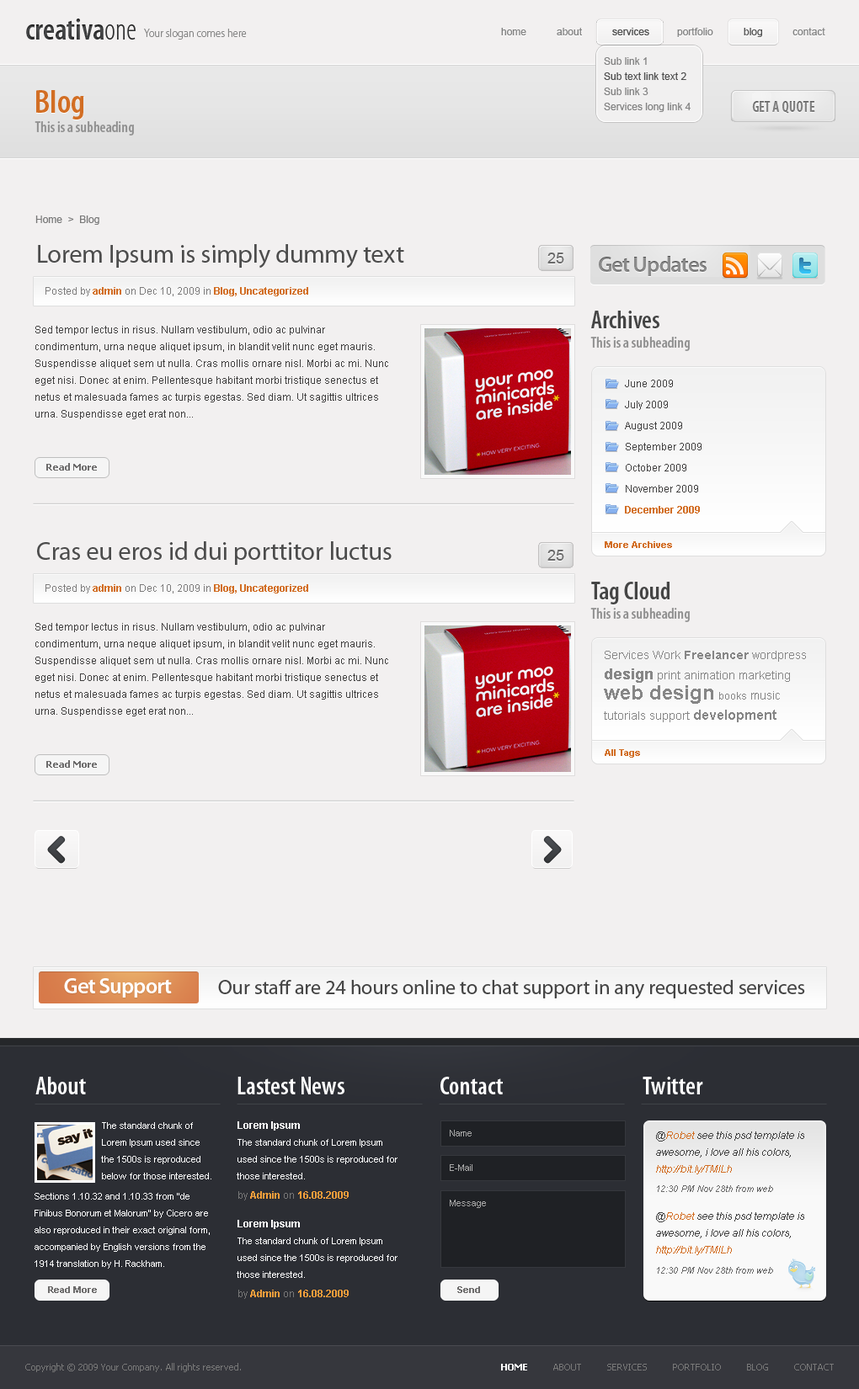
<style>
.page{position:relative;width:859px;height:1389px;background:#f2f0f0}
.page>*{position:absolute;margin:0}
.t1{font:30.3px "MyriadPro-SemiboldCond";color:#37393c}
.t2{font:30.3px "MyriadPro-LightCond";color:#37393c}
.t3{font:11.8px "MyriadPro-LightSemiCn";color:#868686}
.t4{font:10.1px "ArialMT";color:#818181}
.t5{font:10.1px "ArialMT";color:#4e4e4e}
.t6{font:10.1px/15.2px "ArialMT";color:#818181}
.t7{font:10.1px/15.2px "ArialMT";color:#4e4e4e}
.t8{font:33.7px "MyriadPro-SemiboldCond";color:#d26e24}
.t9{font:15.2px "MyriadPro-SemiboldCond";color:#818181}
.t10{font:15.2px "MyriadPro-SemiboldCond";color:#909090}
.t11{font:10.1px "ArialMT";color:#797979}
.t12{font:25.3px "MyriadPro-Regular";color:#4c4c4c}
.t13{font:15.2px "ArialMT";color:#6a6a6a}
.t14{font:21.9px "MyriadPro-Semibold";letter-spacing:-0.035em;color:#8b8b8b}
.t15{font:10.1px "Arial-BoldMT";color:#d26e24}
.t16{font:10.1px "ArialMT";color:#7d7c7c}
.t17{font:25.3px "MyriadPro-SemiboldCond";color:#454545}
.t18{font:10.1px/16.8px "ArialMT";color:#414040}
.t19{font:10.1px/21px "ArialMT";color:#414040}
.t20{font:10.1px/21px "Arial-BoldMT";color:#d26e24}
.t21{font:9.3px "Tahoma-Bold";color:#6d6c6c}
.t22{font:9.3px "Arial-BoldMT";color:#d26e24}
.t23{font:11.8px/20.2px "ArialMT";color:#868686}
.t24{font:11.8px/20.2px "Arial-BoldMT";color:#868686}
.t25{font:15.2px/20.2px "Arial-BoldMT";color:#868686}
.t26{font:20.2px/20.2px "Arial-BoldMT";color:#868686}
.t27{font:10.1px/20.2px "ArialMT";color:#868686}
.t28{font:13.5px/20.2px "Arial-BoldMT";color:#868686}
.t29{font:21.9px "MyriadPro-Semibold";letter-spacing:-0.035em;color:#ffffff}
.t30{font:20.2px "MyriadPro-Regular";color:#454545}
.t31{font:25.3px "MyriadPro-SemiboldCond";color:#ffffff}
.t32{font:10.1px "Arial-BoldMT";color:#ffffff}
.t33{font:9.3px/16.8px "ArialMT";color:#ffffff}
.t34{font:9.3px "ArialMT";color:#a8a8a8}
.t35{font:10.1px/16.8px "Arial-ItalicMT";color:#414141}
.t36{font:10.1px/16.8px "Arial-ItalicMT";color:#d26e24}
.t37{font:10.1px "Arial-BoldMT";color:#f19d3b}
.t38{font:10.1px "ArialMT";color:#787878}
.t39{font:9.3px "Arial-ItalicMT";color:#6b6b6b}
.t40{font:9.3px "ArialMT";color:#a7a7a7}
.t41{font:9.3px "Arial-BoldMT";color:#6d6c6c}
.t42{font:9.3px "Tahoma";color:#787878}
.t43{font:9.3px "ArialMT";color:#c1b0a2}
.t44{font:9.3px "Tahoma-Bold";color:#ffffff}
</style>
<div class="page">
<p class="t1" style="left:26px;top:19px;width:110px;height:21px;opacity:0.9">creativa<span class="t2">one</span></p>
<p class="t3" style="left:144px;top:29px;width:103px;height:11px">Your slogan comes here</p>
<p class="t4" style="left:501px;top:28px;width:25px;height:7px">home</p>
<p class="t4" style="left:556px;top:28px;width:26px;height:7px">about</p>
<p class="t5" style="left:612px;top:28px;width:37px;height:7px">services</p>
<p class="t5" style="left:612px;top:28px;width:37px;height:7px">services</p>
<p class="t4" style="left:677px;top:28px;width:36px;height:9px">portfolio</p>
<p class="t5" style="left:743px;top:28px;width:19px;height:9px">blog</p>
<p class="t4" style="left:792px;top:28px;width:33px;height:7px">contact</p>
<p class="t6" style="left:604px;top:57px;width:86px;height:55px">Sub link 1<br><span class="t7">Sub text link text 2<br></span>Sub link 3<br>Services long link 4</p>
<p class="t8" style="left:36px;top:90px;width:48px;height:30px">Blog</p>
<p class="t9" style="left:752px;top:101px;width:63px;height:13px">GET A QUOTE</p>
<p class="t10" style="left:35px;top:121px;width:99px;height:15px">This is a subheading</p>
<p class="t11" style="left:35px;top:215px;width:64px;height:10px">Home  &gt;  Blog</p>
<p class="t12" style="left:38px;top:244px;width:366px;height:25px">Lorem Ipsum is simply dummy text</p>
<p class="t13" style="left:547px;top:253px;width:17px;height:10px">25</p>
<p class="t14" style="left:598px;top:256px;width:108px;height:20px">Get Updates</p>
<p class="t15" style="left:45px;top:287px;width:263px;height:9px"><span class="t16">Posted by </span>admin<span class="t16"> on Dec 10, 2009 in </span>Blog, Uncategorized</p>
<p class="t17" style="left:591px;top:311px;width:68px;height:17px">Archives</p>
<p class="t18" style="left:35px;top:326px;width:353px;height:93px">Sed tempor lectus in risus. Nullam vestibulum, odio ac pulvinar condimentum, urna neque aliquet ipsum, in blandit velit nunc eget mauris. Suspendisse aliquet sem ut nulla. Cras mollis ornare nisl. Morbi ac mi. Nunc eget nisi. Donec at enim. Pellentesque habitant morbi tristique senectus et netus et malesuada fames ac turpis egestas. Sed diam. Ut sagittis ultrices urna. Suspendisse eget erat non...</p>
<p class="t10" style="left:590px;top:337px;width:99px;height:14px">This is a subheading</p>
<p class="t19" style="left:625px;top:380px;width:76px;height:133px">June 2009<br>July 2009<br>August 2009<br>September 2009<br>October 2009<br>November 2009<br><span class="t20">December 2009</span></p>
<p class="t21" style="left:46px;top:463px;width:51px;height:8px">Read More</p>
<p class="t12" style="left:37px;top:541px;width:354px;height:24px">Cras eu eros id dui porttitor luctus</p>
<p class="t22" style="left:604px;top:541px;width:68px;height:7px">More Archives</p>
<p class="t13" style="left:547px;top:550px;width:17px;height:11px">25</p>
<p class="t17" style="left:591px;top:582px;width:78px;height:22px">Tag Cloud</p>
<p class="t15" style="left:45px;top:584px;width:263px;height:9px"><span class="t16">Posted by </span>admin<span class="t16"> on Dec 10, 2009 in </span>Blog, Uncategorized</p>
<p class="t10" style="left:590px;top:608px;width:99px;height:14px">This is a subheading</p>
<p class="t18" style="left:35px;top:623px;width:353px;height:93px">Sed tempor lectus in risus. Nullam vestibulum, odio ac pulvinar condimentum, urna neque aliquet ipsum, in blandit velit nunc eget mauris. Suspendisse aliquet sem ut nulla. Cras mollis ornare nisl. Morbi ac mi. Nunc eget nisi. Donec at enim. Pellentesque habitant morbi tristique senectus et netus et malesuada fames ac turpis egestas. Sed diam. Ut sagittis ultrices urna. Suspendisse eget erat non...</p>
<p class="t23" style="left:604px;top:651px;width:202px;height:71px">Services Work <span class="t24">Freelancer</span> wordpress <span class="t25">design</span> print animation marketing <span class="t26">web design </span><span class="t27">books</span> music tutorials support <span class="t28">development</span></p>
<p class="t22" style="left:604px;top:749px;width:36px;height:9px">All Tags</p>
<p class="t21" style="left:46px;top:760px;width:51px;height:8px">Read More</p>
<p class="t29" style="left:64px;top:978px;width:108px;height:19px">Get Support</p>
<p class="t30" style="left:218px;top:980px;width:587px;height:18px">Our staff are 24 hours online to chat support in any requested services</p>
<p class="t31" style="left:35px;top:1077px;width:51px;height:17px">About</p>
<p class="t31" style="left:237px;top:1077px;width:107px;height:17px">Lastest News</p>
<p class="t31" style="left:440px;top:1077px;width:63px;height:17px">Contact</p>
<p class="t31" style="left:642px;top:1077px;width:61px;height:17px">Twitter</p>
<p class="t32" style="left:237px;top:1121px;width:63px;height:9px">Lorem Ipsum</p>
<p class="t33" style="left:101px;top:1122px;width:110px;height:57px">The standard chunk of Lorem Ipsum used since <br>the 1500s is reproduced below for those interested.</p>
<p class="t34" style="left:449px;top:1130px;width:22px;height:6px">Name</p>
<p class="t35" style="left:656px;top:1131px;width:148px;height:43px">@<span class="t36">Robet </span>see this psd template is awesome, i love all his colors, <span class="t36">http://bit.ly/TMlLh</span></p>
<p class="t33" style="left:237px;top:1139px;width:160px;height:40px">The standard chunk of Lorem Ipsum <br>used since the 1500s is reproduced for those interested.</p>
<p class="t34" style="left:449px;top:1164px;width:23px;height:7px">E-Mail</p>
<p class="t33" style="left:35px;top:1193px;width:175px;height:75px">Sections 1.10.32 and 1.10.33 from "de Finibus Bonorum et Malorum" by Cicero are also reproduced in their exact original form, accompanied by English versions from the 1914 translation by H. Rackham.</p>
<p class="t37" style="left:238px;top:1191px;width:110px;height:9px"><span class="t38">by </span>Admin<span class="t38"> on </span>16.08.2009</p>
<p class="t39" style="left:657px;top:1185px;width:116px;height:7px">12:30 PM Nov 28th from web</p>
<p class="t40" style="left:449px;top:1199px;width:37px;height:9px">Message</p>
<p class="t35" style="left:656px;top:1212px;width:148px;height:43px">@<span class="t36">Robet </span>see this psd template is awesome, i love all his colors, <span class="t36">http://bit.ly/TMlLh</span></p>
<p class="t32" style="left:237px;top:1220px;width:63px;height:9px">Lorem Ipsum</p>
<p class="t33" style="left:237px;top:1237px;width:160px;height:41px">The standard chunk of Lorem Ipsum <br>used since the 1500s is reproduced for those interested.</p>
<p class="t39" style="left:657px;top:1267px;width:116px;height:7px">12:30 PM Nov 28th from web</p>
<p class="t41" style="left:48px;top:1286px;width:49px;height:7px">Read More</p>
<p class="t37" style="left:238px;top:1290px;width:110px;height:9px"><span class="t38">by </span>Admin<span class="t38"> on </span>16.08.2009</p>
<p class="t41" style="left:457px;top:1286px;width:23px;height:7px">Send</p>
<p class="t42" style="left:25px;top:1363px;width:216px;height:9px"><span class="t43"><br></span>Copyright © 2009 Your Company. All rights reserved.</p>
<p class="t42" style="left:501px;top:1364px;width:332px;height:6px"><span class="t44">HOME          </span>ABOUT          SERVICES          PORTFOLIO          BLOG          CONTACT</p>
</div>
